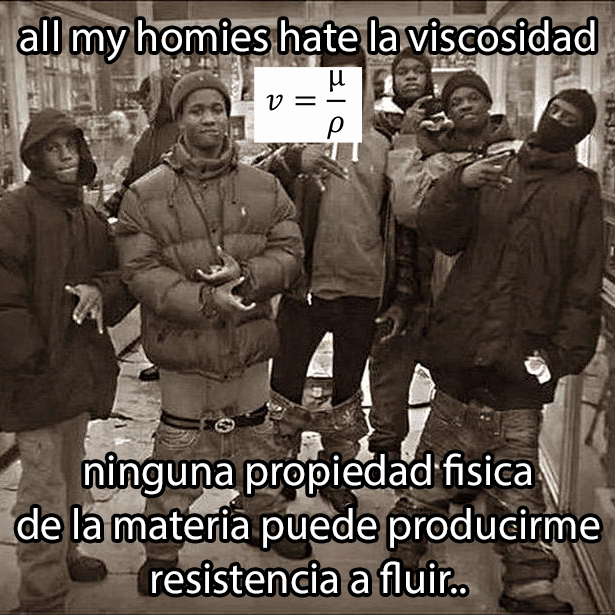
<style>
.page{position:relative;width:615px;height:615px}
.page>*{position:absolute;margin:0}
.t1{font:43.4px "MyriadPro-Regular";color:#ffffff}
.t2{font:43.7px "MyriadPro-Regular";color:#ffffff}
</style>
<div class="page">
<p class="t1" style="left:20px;top:20px;width:575px;height:41px">all my homies hate la viscosidad</p>
<p class="t2" style="left:17px;top:453px;width:583px;height:141px;text-align:center">ninguna propiedad fisica<br>de la materia puede producirme<br>resistencia a fluir..</p>
</div>
